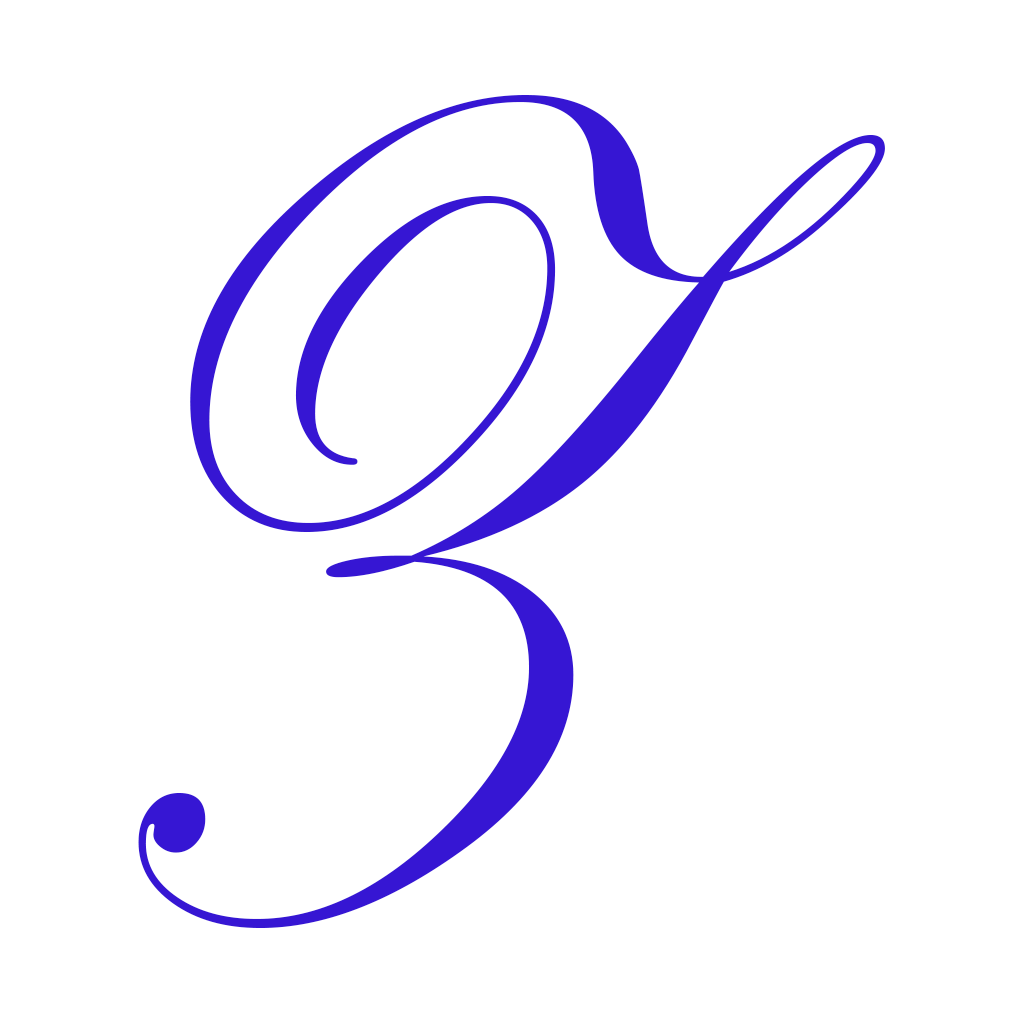
<style>
.page{position:relative;width:1024px;height:1024px;background:#ffffff}
.page>*{position:absolute;margin:0}
.t1{font:833.3px "EdwardianScriptITC";color:#3616d4}
</style>
<div class="page">
<p class="t1" style="left:138px;top:95px;width:747px;height:833px">Z</p>
</div>
